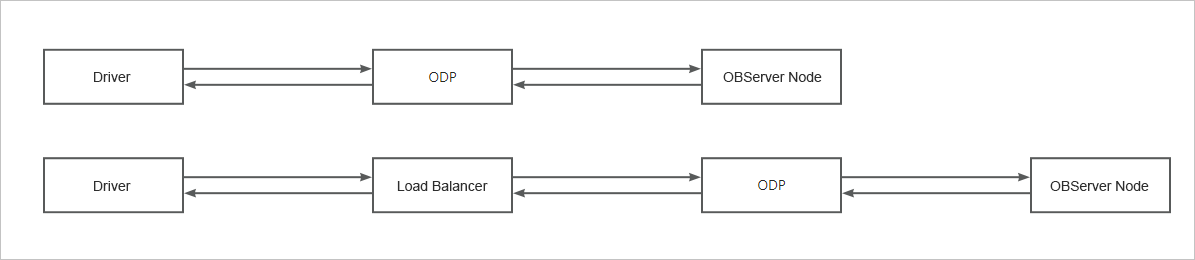
<style>
.page{position:relative;width:1195px;height:260px;background:#ffffff}
.page>*{position:absolute;margin:0}
.t1{font:14px "ArialMT";color:#2e2e2e}
</style>
<div class="page">
<p class="t1" style="left:94px;top:72px;width:37px;height:10px">Driver</p>
<p class="t1" style="left:723px;top:72px;width:99px;height:10px">OBServer Node</p>
<p class="t1" style="left:94px;top:181px;width:37px;height:10px">Driver</p>
<p class="t1" style="left:397px;top:181px;width:91px;height:10px">Load Balancer</p>
<p class="t1" style="left:1050px;top:181px;width:99px;height:10px">OBServer Node</p>
</div>
